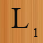
<style>
.page{position:relative;width:43px;height:43px}
.page>*{position:absolute;margin:0}
.t1{font:30px "TimesNewRomanPSMT";color:#0c0c0b}
.t2{font:12px "TimesNewRomanPSMT";color:#0c0c0b}
</style>
<div class="page">
<p class="t1" style="left:11px;top:8px;width:18px;height:20px">L</p>
<p class="t2" style="left:34px;top:28px;width:4px;height:9px">1</p>
</div>
